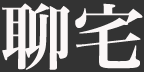
<style>
.page{position:relative;width:144px;height:72px;background:#333333}
.page>*{position:absolute;margin:0}
.t1{font:72px "HiraMinProN-W6";color:#fbf7f7}
</style>
<div class="page">
<p class="t1" style="left:2px;top:3px;width:141px;height:67px">聊宅</p>
</div>
